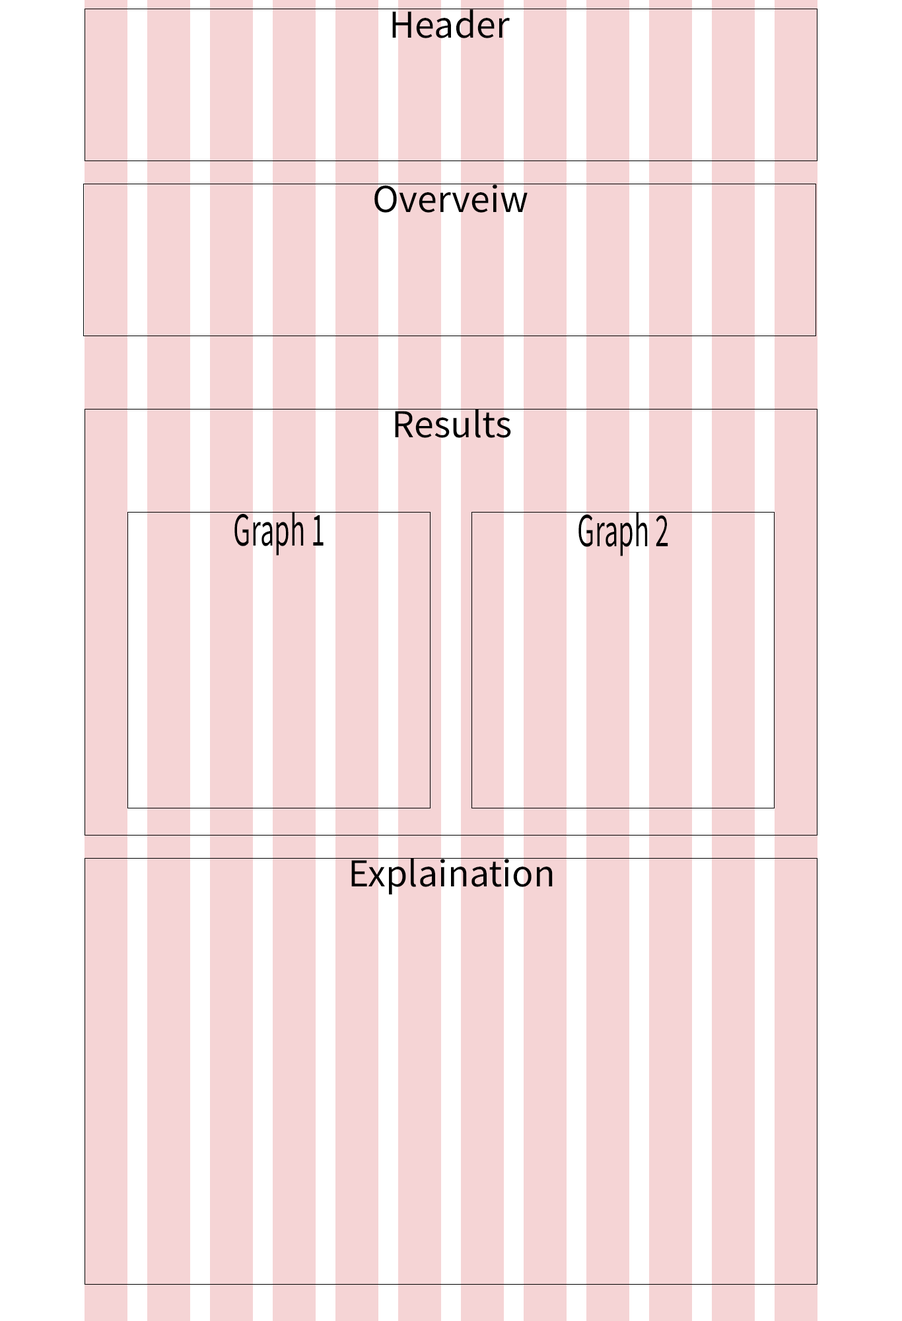
<style>
.page{position:relative;width:902px;height:1321px;background:#f5d4d5}
.page>*{position:absolute;margin:0}
.t1{font:39.7px "SourceSansRoman-Regular";color:#000000}
.t2{font:47.6px "SourceSansRoman-Regular";color:#000000;scale:0.59 1}
</style>
<div class="page">
<p class="t1" style="left:392px;top:9px;width:118px;height:29px">Header</p>
<p class="t1" style="left:375px;top:184px;width:153px;height:29px">Overveiw</p>
<p class="t1" style="left:395px;top:409px;width:116px;height:29px">Results</p>
<p class="t2" style="left:235px;top:511px;width:89px;height:45px">Graph 1</p>
<p class="t2" style="left:579px;top:512px;width:90px;height:44px">Graph 2</p>
<p class="t1" style="left:351px;top:858px;width:202px;height:37px">Explaination</p>
</div>
